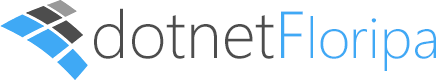
<style>
.page{position:relative;width:440px;height:80px;background:#ffffff}
.page>*{position:absolute;margin:0}
.t1{font:66.6px "SegoeUI-Light";color:#4d4d4d}
.t2{font:66.6px "SegoeUI-Light";color:#3fa9f5}
.t3{font:56.8px "SegoeUI-Light";color:#3fa9f5}
</style>
<div class="page">
<p class="t1" style="left:94px;top:8px;width:342px;height:63px">dotnet<span class="t2">F</span><span class="t3">loripa</span></p>
</div>
